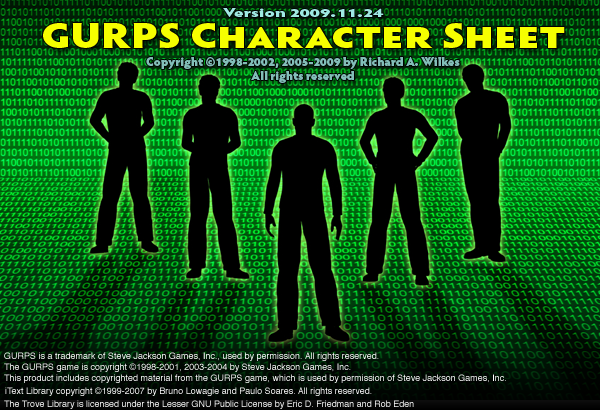
<style>
.page{position:relative;width:600px;height:410px}
.page>*{position:absolute;margin:0}
.t1{font:12px "HypatiaSansPro-Black";color:#9fe9e2;scale:1.5 1}
.t2{font:36px "HypatiaSansPro-Black";color:#f6ff00;font-variant:small-caps;scale:1.2 1}
.t3{font:12px "HypatiaSansPro-Black";color:#82beb8}
.t4{font:9px "Helvetica";color:#ffffff}
</style>
<div class="page">
<p class="t1" style="left:223px;top:8px;width:161px;height:9px">Version 2009.11.24</p>
<p class="t2" style="left:43px;top:23px;width:522px;height:25px">GURPS Character Sheet</p>
<p class="t3" style="left:146px;top:57px;width:314px;height:26px;text-align:center">Copyright ©1998-2002, 2005-2009 by Richard A. Wilkes<br>All rights reserved</p>
<p class="t4" style="left:4px;top:352px;width:502px;height:31px">GURPS is a trademark of Steve Jackson Games, Inc., used by permission. All rights reserved.<br>The GURPS game is copyright ©1998-2001, 2003-2004 by Steve Jackson Games, Inc.<br>This product includes copyrighted material from the GURPS game, which is used by permission of Steve Jackson Games, Inc.</p>
<p class="t4" style="left:5px;top:387px;width:367px;height:9px">iText Library copyright ©1999-2007 by Bruno Lowagie and Paulo Soares. All rights reserved.</p>
<p class="t4" style="left:4px;top:400px;width:410px;height:9px">The Trove Library is licensed under the Lesser GNU Public License by Eric D. Friedman and Rob Eden</p>
</div>
